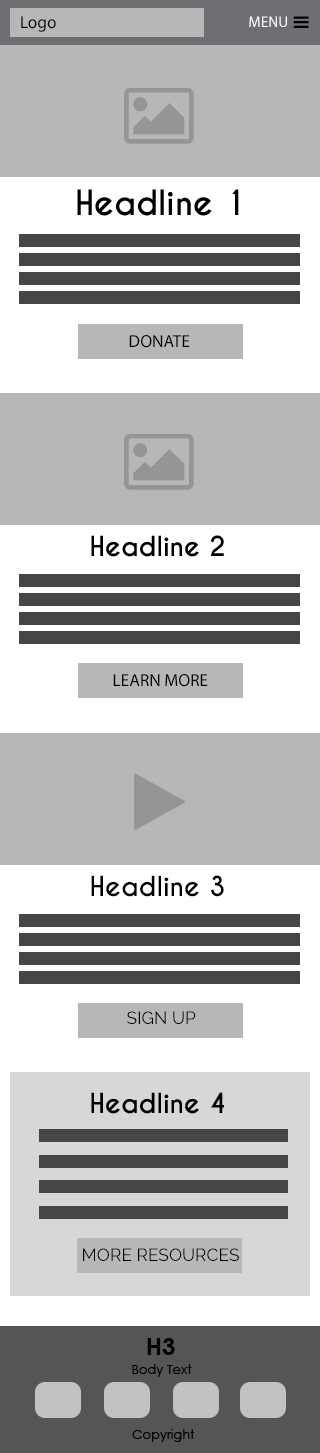
<style>
.page{position:relative;width:320px;height:1453px;background:#b7b7b7}
.page>*{position:absolute;margin:0}
.t1{font:17.3px "MyriadPro-Regular";color:#000000}
.t2{font:15.2px "MyriadPro-Regular";color:#ffffff}
.t3{font:32.5px "CaviarDreams-Bold";color:#000000}
.t4{font:26px "CaviarDreams-Bold";color:#000000}
.t5{font:17.3px "Raleway";color:#000000}
.t6{font:23.8px "CenturyGothic-Bold";color:#000000}
.t7{font:13px "CenturyGothic";color:#000000}
</style>
<div class="page">
<p class="t1" style="left:21px;top:16px;width:35px;height:16px">Logo</p>
<p class="t2" style="left:249px;top:16px;width:38px;height:11px">MENU</p>
<p class="t3" style="left:77px;top:189px;width:162px;height:27px">Headline 1</p>
<p class="t1" style="left:129px;top:335px;width:61px;height:13px">DONATE</p>
<p class="t4" style="left:91px;top:535px;width:133px;height:22px">Headline 2</p>
<p class="t1" style="left:113px;top:674px;width:95px;height:13px">LEARN MORE</p>
<p class="t4" style="left:91px;top:875px;width:133px;height:22px">Headline 3</p>
<p class="t5" style="left:127px;top:1011px;width:69px;height:13px">SIGN UP</p>
<p class="t4" style="left:91px;top:1092px;width:133px;height:22px">Headline 4</p>
<p class="t5" style="left:83px;top:1248px;width:156px;height:13px">MORE RESOURCES</p>
<p class="t6" style="left:147px;top:1338px;width:28px;height:17px">H3</p>
<p class="t7" style="left:132px;top:1364px;width:60px;height:13px">Body Text</p>
<p class="t7" style="left:132px;top:1429px;width:63px;height:13px">Copyright</p>
</div>
